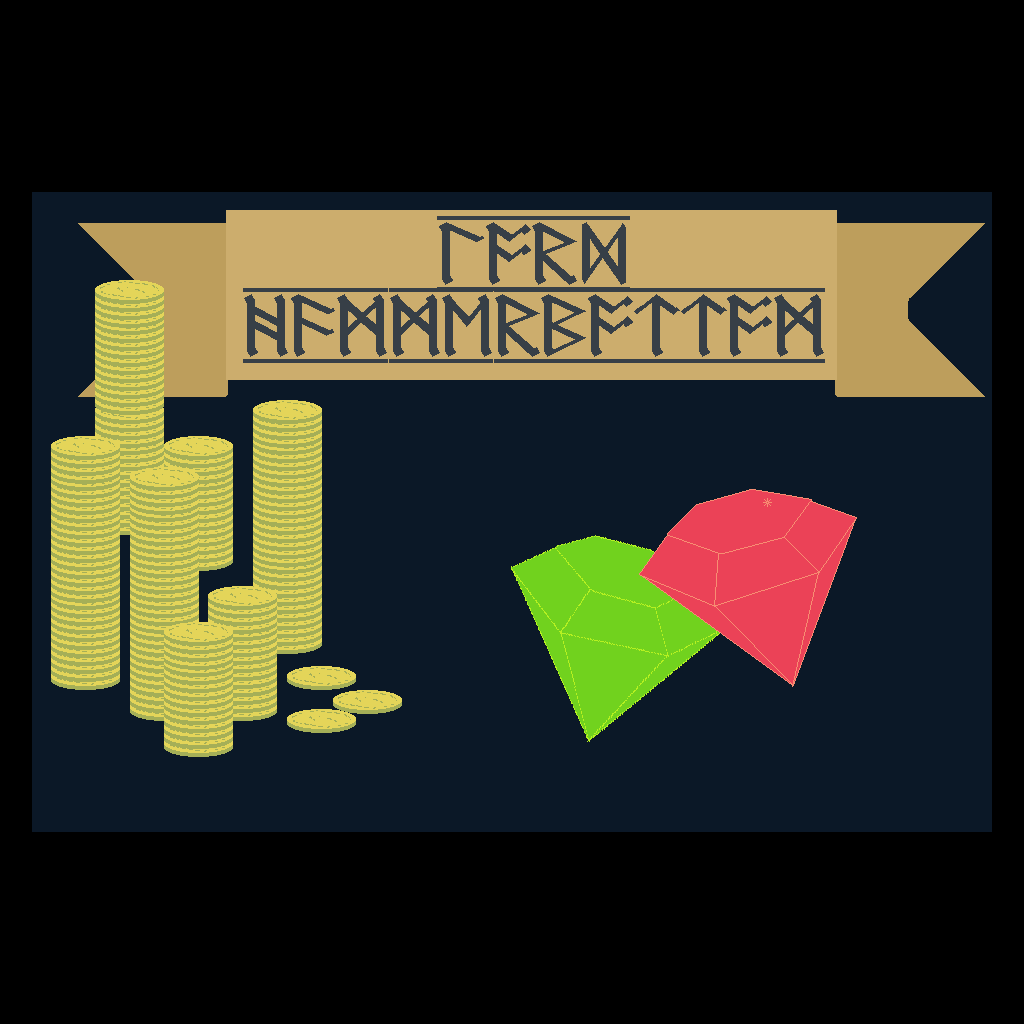
<style>
.page{position:relative;width:1024px;height:1024px;background:#000000}
.page>*{position:absolute;margin:0}
.t1{font:60px "DwarfRunes1";color:#373f47}
</style>
<div class="page">
<p class="t1" style="left:243px;top:216px;width:582px;height:147px;text-align:center">lord<br>hammerbottom</p>
</div>
